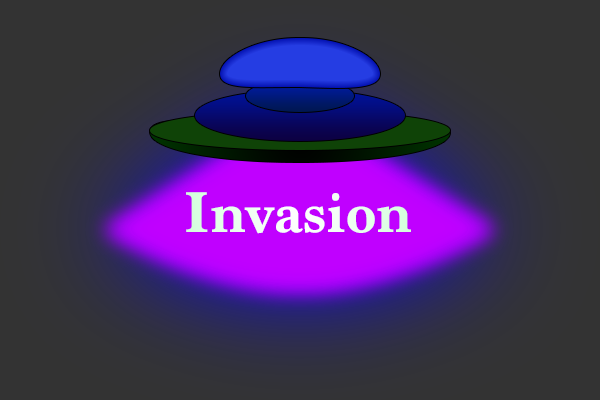
<style>
.page{position:relative;width:600px;height:400px}
.page>*{position:absolute;margin:0}
.t1{font:60px "Marion-Bold";color:#eaffee}
</style>
<div class="page">
<p class="t1" style="left:186px;top:192px;width:225px;height:42px">Invasion</p>
</div>
